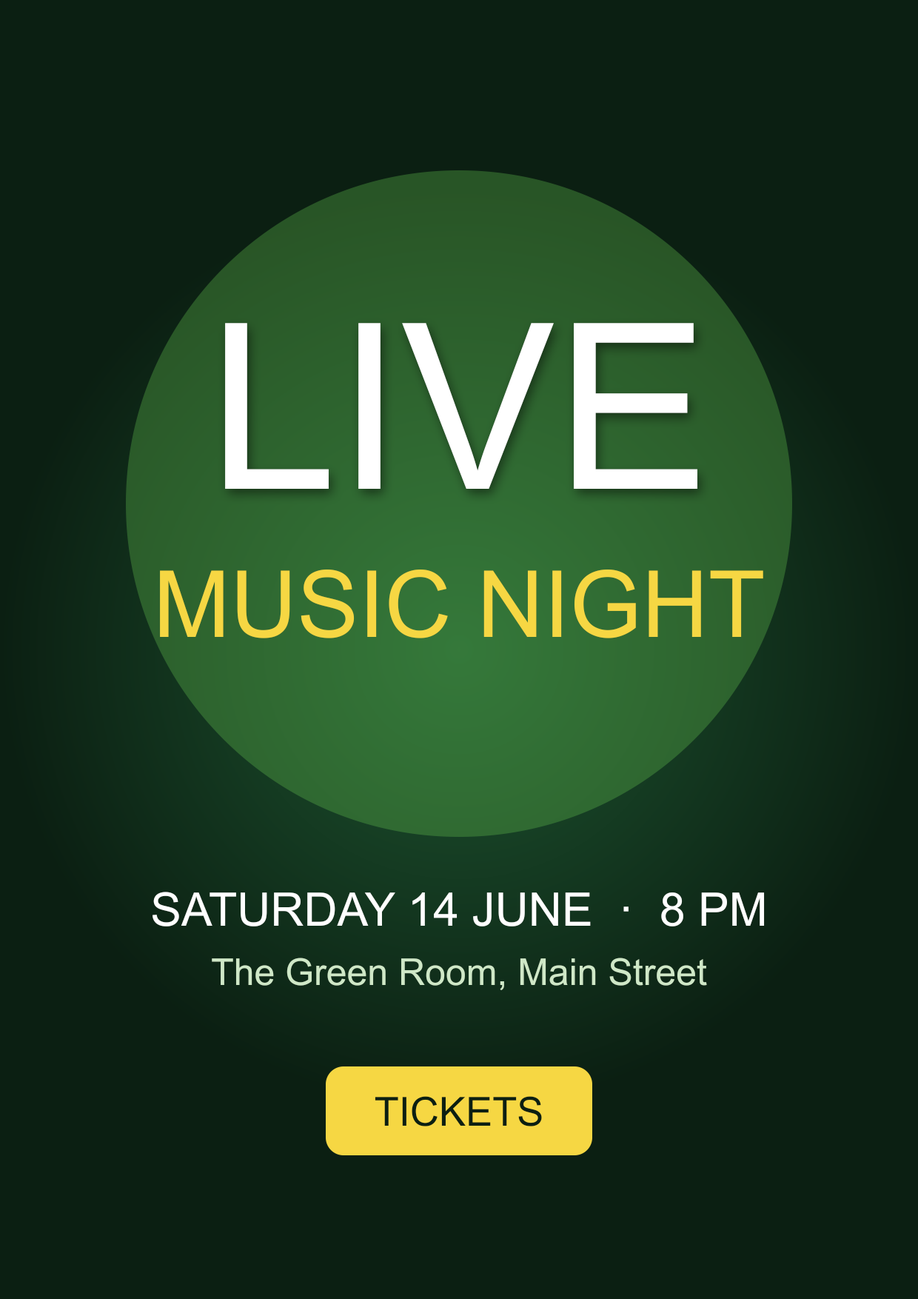
<style>
.page{position:relative;width:918px;height:1299px;background:#0b1f12}
.page>*{position:absolute;margin:0}
.t1{font:231.4px "ArialMT";color:#ffffff}
.t2{font:92.6px "ArialMT";color:#f6d743}
.t3{font:46.3px "ArialMT";color:#ffffff}
.t4{font:37px "ArialMT";color:#cfe8c7}
.t5{font:40.1px "ArialMT";color:#0b1f12}
</style>
<div class="page">
<p class="t1" style="left:224px;top:323px;width:474px;height:166px">LIVE</p>
<p class="t2" style="left:159px;top:569px;width:605px;height:70px">MUSIC NIGHT</p>
<p class="t3" style="left:152px;top:891px;width:614px;height:36px">SATURDAY 14 JUNE  ·  8 PM</p>
<p class="t4" style="left:211px;top:957px;width:497px;height:34px">The Green Room, Main Street</p>
<p class="t5" style="left:374px;top:1096px;width:169px;height:31px">TICKETS</p>
</div>
